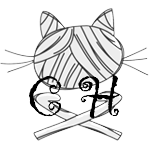
<style>
.page{position:relative;width:150px;height:150px;background:#ffffff}
.page>*{position:absolute;margin:0}
.t1{font:60px "Gigi-Regular";color:#000000}
</style>
<div class="page">
<p class="t1" style="left:29px;top:74px;width:91px;height:45px">C H</p>
</div>
